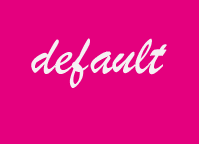
<style>
.page{position:relative;width:199px;height:144px;background:#e4007e}
.page>*{position:absolute;margin:0}
.t1{font:58.3px "STXingkai";color:#f6f1f4}
</style>
<div class="page">
<p class="t1" style="left:31px;top:38px;width:136px;height:50px">default</p>
</div>
